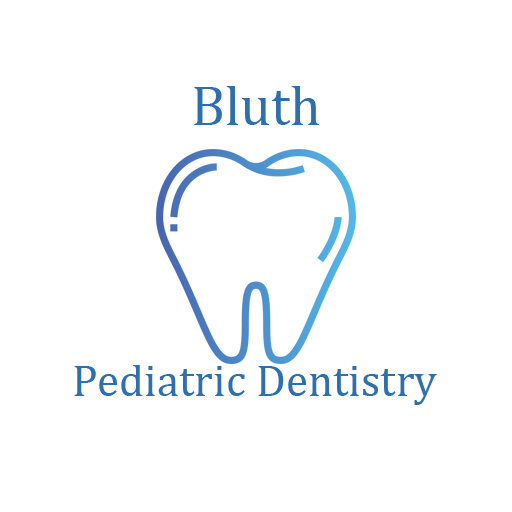
<style>
.page{position:relative;width:512px;height:512px;background:#ffffff}
.page>*{position:absolute;margin:0}
.t1{font:56px "CambriaMath";color:#2e6fb0}
.t2{font:45.2px "CambriaMath";color:#2e6fb0}
</style>
<div class="page">
<p class="t1" style="left:194px;top:86px;width:125px;height:39px">Bluth</p>
<p class="t2" style="left:74px;top:365px;width:363px;height:40px">Pediatric Dentistry</p>
</div>
